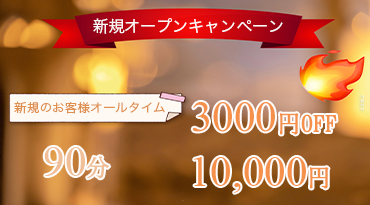
<style>
.page{position:relative;width:370px;height:205px}
.page>*{position:absolute;margin:0}
.t1{font:16px "HiraKakuPro-W3";color:#faf9f8}
.t2{font:12px "HiraKakuPro-W3";color:#df9051;scale:1.06 1}
.t3{font:43px "TimesNewRomanPSMT";color:#f6914b}
.t4{font:24px "SimSong-Bold";color:#f6914b}
</style>
<div class="page">
<p class="t1" style="left:93px;top:18px;width:190px;height:16px">新規オープンキャンペーン</p>
<p class="t2" style="left:14px;top:101px;width:151px;height:13px">新規のお客様オールタイム</p>
<p class="t3" style="left:192px;top:102px;width:145px;height:33px">3000<span class="t4">円OFF</span></p>
<p class="t3" style="left:194px;top:157px;width:135px;height:36px">10,000<span class="t4">円</span></p>
</div>
